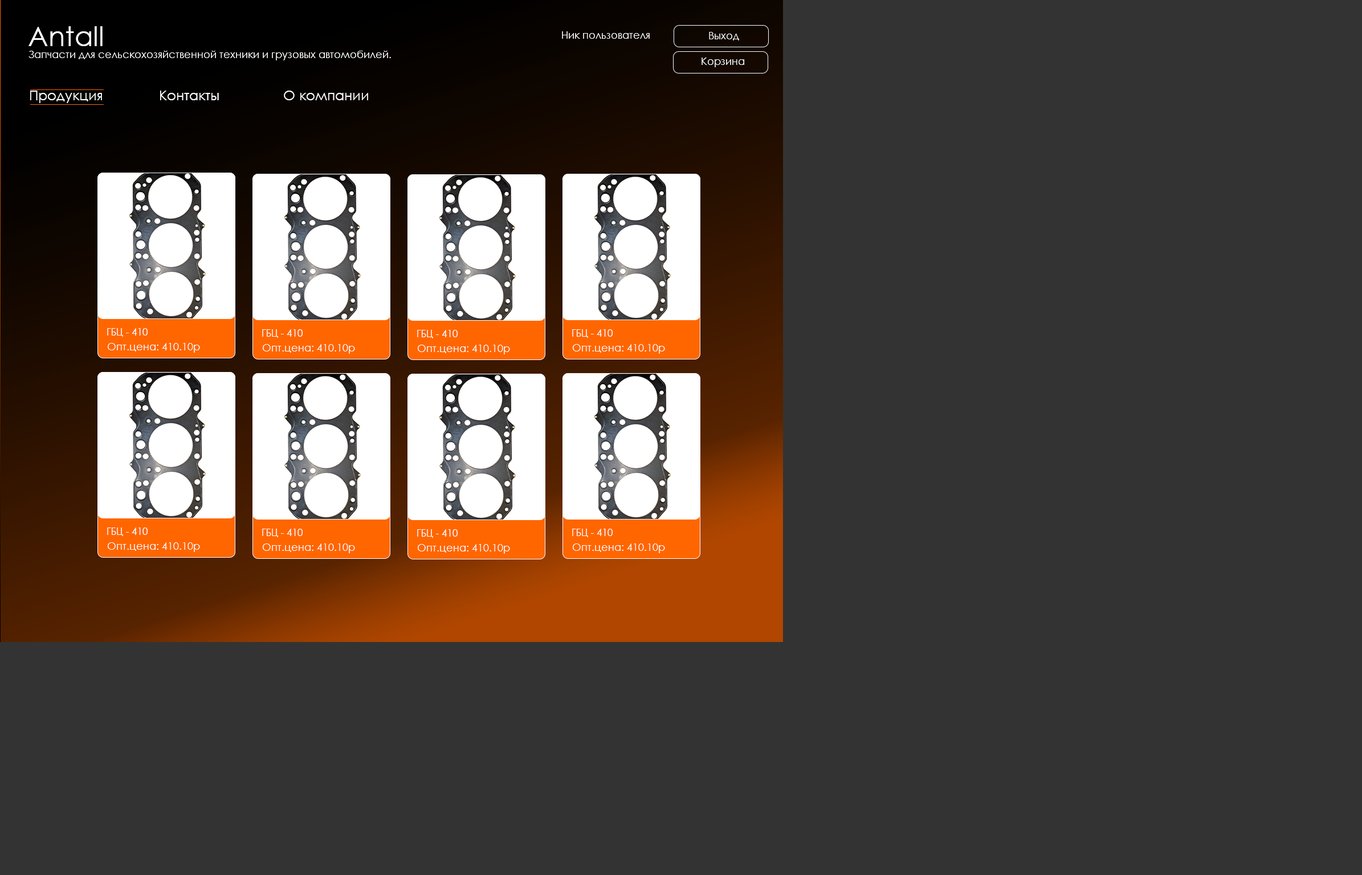
<style>
.page{position:relative;width:1362px;height:875px;background:#333333}
.page>*{position:absolute;margin:0}
.t1{font:27.4px "CenturyGothic";color:#ffffff}
.t2{font:10.3px "CenturyGothic";color:#ffffff}
.t3{font:13.7px "CenturyGothic";color:#ffffff}
.t4{font:10.3px "CenturyGothic";color:#ffffff;scale:0.94 1}
</style>
<div class="page">
<p class="t1" style="left:28px;top:26px;width:75px;height:20px">Antall</p>
<p class="t2" style="left:562px;top:31px;width:88px;height:8px">Ник пользователя</p>
<p class="t2" style="left:709px;top:32px;width:30px;height:8px">Выход</p>
<p class="t2" style="left:28px;top:51px;width:363px;height:9px">Запчасти для сельскохозяйственной техники и грузовых автомобилей.</p>
<p class="t2" style="left:702px;top:58px;width:42px;height:9px">Корзина</p>
<p class="t3" style="left:30px;top:91px;width:338px;height:12px">Продукция              Контакты                О компании</p>
<p class="t4" style="left:107px;top:328px;width:41px;height:9px">ГБЦ - 410</p>
<p class="t4" style="left:262px;top:329px;width:41px;height:9px">ГБЦ - 410</p>
<p class="t4" style="left:417px;top:330px;width:41px;height:9px">ГБЦ - 410</p>
<p class="t4" style="left:572px;top:329px;width:41px;height:9px">ГБЦ - 410</p>
<p class="t2" style="left:108px;top:343px;width:92px;height:10px">Опт.цена: 410.10р</p>
<p class="t2" style="left:263px;top:344px;width:92px;height:10px">Опт.цена: 410.10р</p>
<p class="t2" style="left:418px;top:345px;width:92px;height:9px">Опт.цена: 410.10р</p>
<p class="t2" style="left:573px;top:344px;width:92px;height:10px">Опт.цена: 410.10р</p>
<p class="t4" style="left:107px;top:528px;width:41px;height:8px">ГБЦ - 410</p>
<p class="t4" style="left:262px;top:529px;width:41px;height:8px">ГБЦ - 410</p>
<p class="t4" style="left:417px;top:529px;width:41px;height:9px">ГБЦ - 410</p>
<p class="t4" style="left:572px;top:529px;width:41px;height:8px">ГБЦ - 410</p>
<p class="t2" style="left:108px;top:543px;width:92px;height:9px">Опт.цена: 410.10р</p>
<p class="t2" style="left:263px;top:544px;width:92px;height:9px">Опт.цена: 410.10р</p>
<p class="t2" style="left:418px;top:544px;width:92px;height:10px">Опт.цена: 410.10р</p>
<p class="t2" style="left:573px;top:544px;width:92px;height:9px">Опт.цена: 410.10р</p>
</div>
